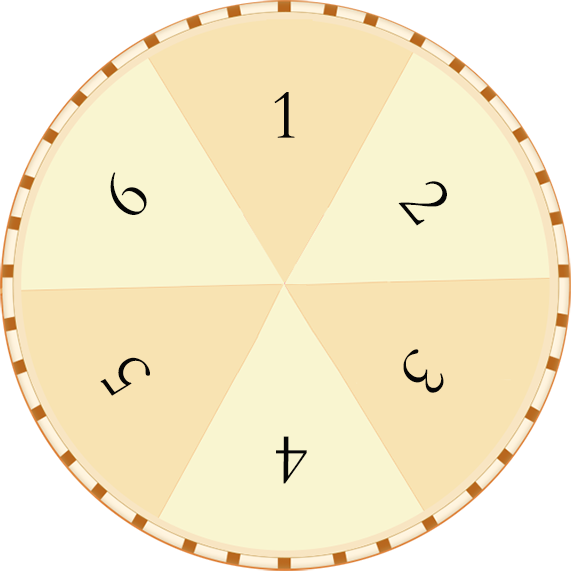
<style>
.page{position:relative;width:571px;height:571px;background:#f8e3b2}
.page>*{position:absolute;margin:0}
.t1{font:72px "STFangsong";color:#060606}
</style>
<div class="page">
<p class="t1" style="left:274px;top:92px;width:21px;height:46px">1</p>
<p class="t1" style="left:110px;top:172px;width:37px;height:43px;rotate:-50deg">6</p>
<p class="t1" style="left:398px;top:181px;width:49px;height:45px;rotate:51deg">2</p>
<p class="t1" style="left:403px;top:349px;width:41px;height:44px;rotate:131deg">3</p>
<p class="t1" style="left:100px;top:357px;width:50px;height:39px;rotate:-125deg">5</p>
<p class="t1" style="left:276px;top:436px;width:31px;height:48px;rotate:-180deg">4</p>
</div>
